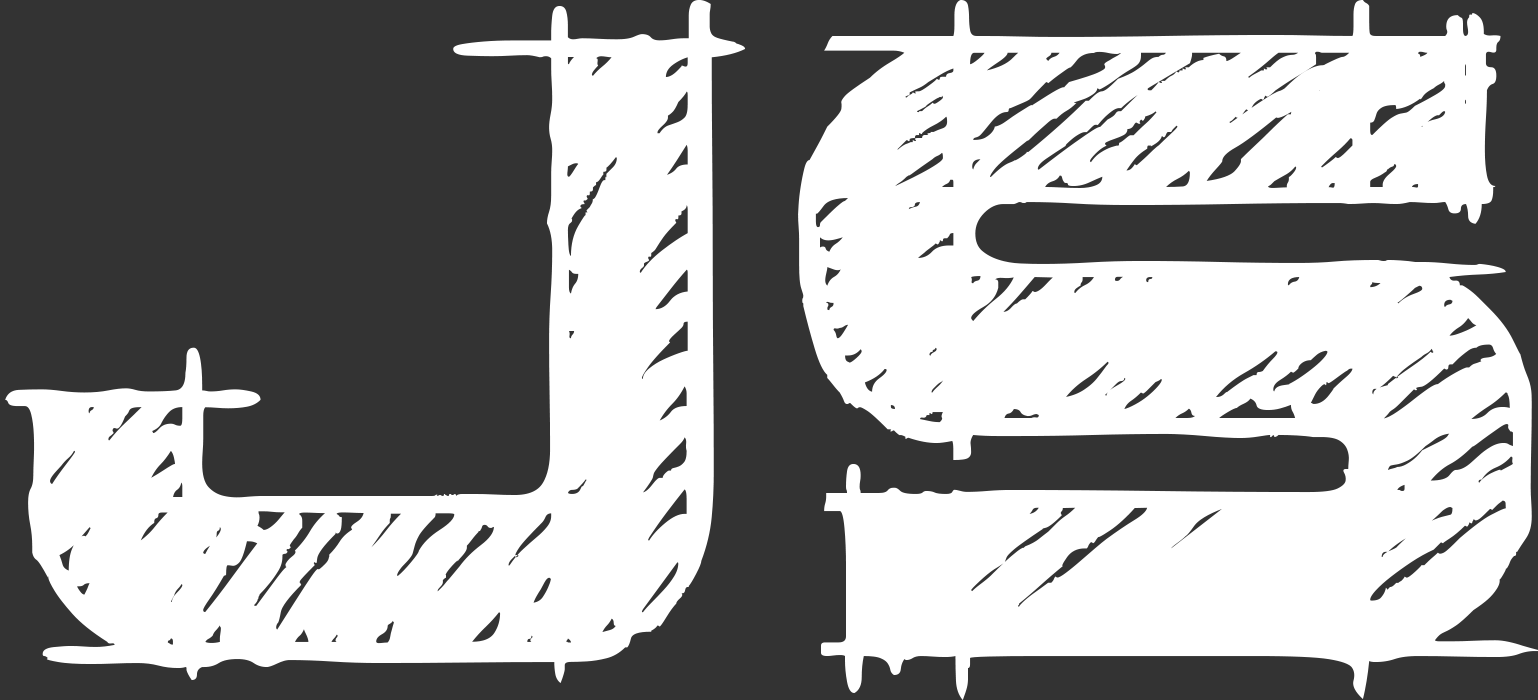
<style>
.page{position:relative;width:1538px;height:700px;background:#ffffff}
.page>*{position:absolute;margin:0}
.t1{font:1041.7px "SaucerBB";color:#ffffff}
</style>
<div class="page">
<p class="t1" style="left:5px;top:0px;width:1533px;height:700px">JS</p>
</div>
